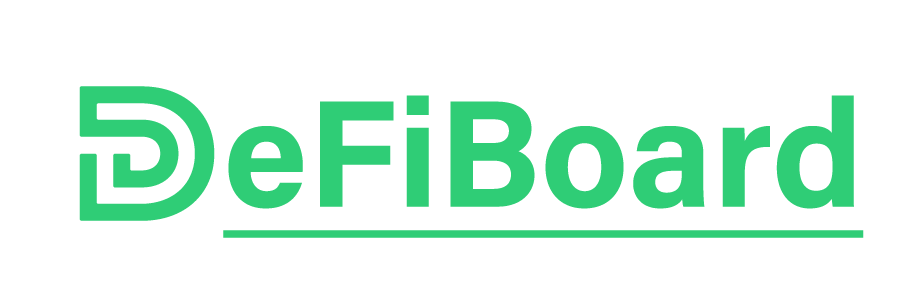
<style>
.page{position:relative;width:898px;height:300px;background:#ffffff}
.page>*{position:absolute;margin:0}
.t1{font:152px "AcuminConcept-Bold";color:#2fcd76;text-decoration:underline}
</style>
<div class="page">
<p class="t1" style="left:223px;top:95px;width:641px;height:143px">eFiBoard</p>
</div>
